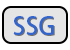
<style>
.page{position:relative;width:70px;height:50px;background:#e5e5e5}
.page>*{position:absolute;margin:0}
.t1{font:24px "AdobeHeitiStd-Regular";color:#3366cc}
.t2{font:24px "AdobeHeitiStd-Regular"}
</style>
<div class="page">
<p class="t1" style="left:13px;top:16px;width:41px;height:19px">SSG</p>
<p class="t2" style="left:14px;top:17px;width:41px;height:19px">SSG</p>
</div>
